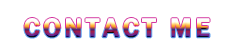
<style>
.page{position:relative;width:233px;height:54px;background:#ffffff}
.page>*{position:absolute;margin:0}
.t1{font:26.9px "FranklinGothic-Medium";letter-spacing:0.115em;font-weight:bold}
</style>
<div class="page">
<p class="t1" style="left:24px;top:18px;width:186px;height:20px">CONTACT ME</p>
</div>
